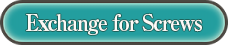
<style>
.page{position:relative;width:228px;height:45px}
.page>*{position:absolute;margin:0}
.t1{font:23px "RyuminPro-ExBold";letter-spacing:-0.08em;color:#ffffff;scale:0.9 1}
</style>
<div class="page">
<p class="t1" style="left:26px;top:13px;width:176px;height:22px">Exchange for Screws</p>
</div>
